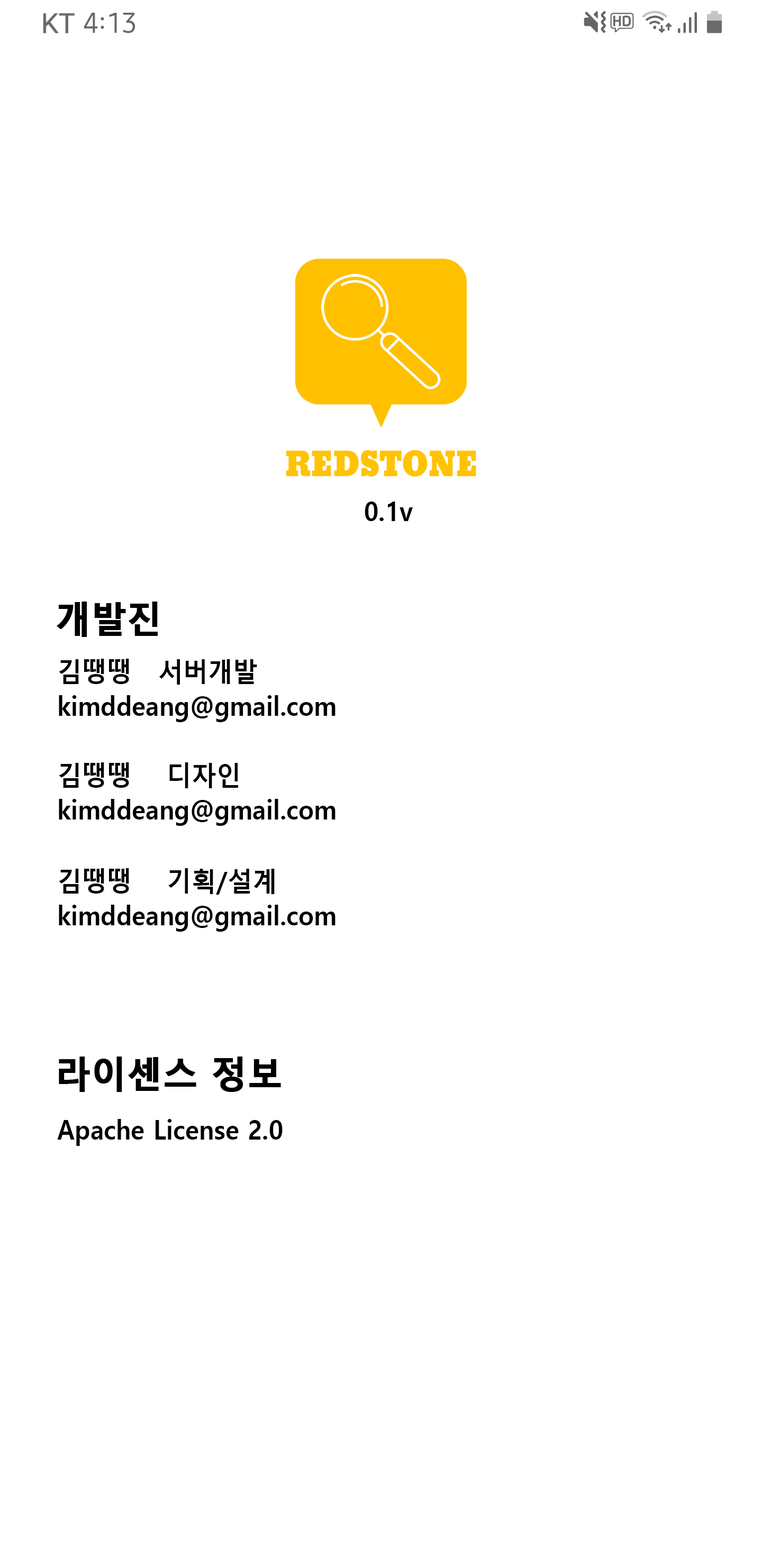
<style>
.page{position:relative;width:762px;height:1566px;background:#ffffff}
.page>*{position:absolute;margin:0}
.t1{font:32.3px "Bevan";color:#ffc300;scale:0.94 1}
.t2{font:26.4px "MalgunGothicBold";color:#000000;scale:0.94 1}
.t3{font:37px "MalgunGothicBold";color:#000000;font-weight:bold;scale:0.94 1}
</style>
<div class="page">
<p class="t1" style="left:286px;top:450px;width:190px;height:27px">REDSTONE</p>
<p class="t2" style="left:364px;top:501px;width:49px;height:20px">0.1v</p>
<p class="t3" style="left:57px;top:601px;width:101px;height:36px">개발진</p>
<p class="t2" style="left:59px;top:659px;width:198px;height:25px">김땡땡   서버개발</p>
<p class="t2" style="left:59px;top:695px;width:276px;height:27px">kimddeang@gmail.com</p>
<p class="t2" style="left:59px;top:762px;width:179px;height:26px">김땡땡    디자인</p>
<p class="t2" style="left:59px;top:799px;width:276px;height:27px">kimddeang@gmail.com</p>
<p class="t2" style="left:59px;top:868px;width:216px;height:26px">김땡땡    기획/설계</p>
<p class="t2" style="left:59px;top:904px;width:276px;height:27px">kimddeang@gmail.com</p>
<p class="t3" style="left:59px;top:1056px;width:222px;height:36px">라이센스 정보</p>
<p class="t2" style="left:57px;top:1119px;width:225px;height:27px">Apache License 2.0</p>
</div>
